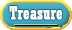
<style>
.page{position:relative;width:72px;height:30px}
.page>*{position:absolute;margin:0}
.t1{font:18px "Rockwell-Condensed";color:#ffffff;font-weight:bold}
</style>
<div class="page">
<p class="t1" style="left:9px;top:6px;width:54px;height:14px">Treasure</p>
</div>
